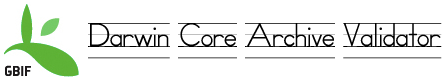
<style>
.page{position:relative;width:445px;height:77px;background:#ffffff}
.page>*{position:absolute;margin:0}
.t1{font:36px "SchoolHousePrintedA";color:#000000}
</style>
<div class="page">
<p class="t1" style="left:88px;top:23px;width:354px;height:36px">Darwin Core Archive Validator</p>
</div>
